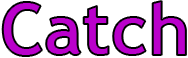
<style>
.page{position:relative;width:188px;height:58px;background:#ffffff}
.page>*{position:absolute;margin:0}
.t1{font:72px "TrebuchetMS-Bold";color:#ba00cb}
</style>
<div class="page">
<p class="t1" style="left:2px;top:1px;width:184px;height:55px">Catch</p>
</div>
